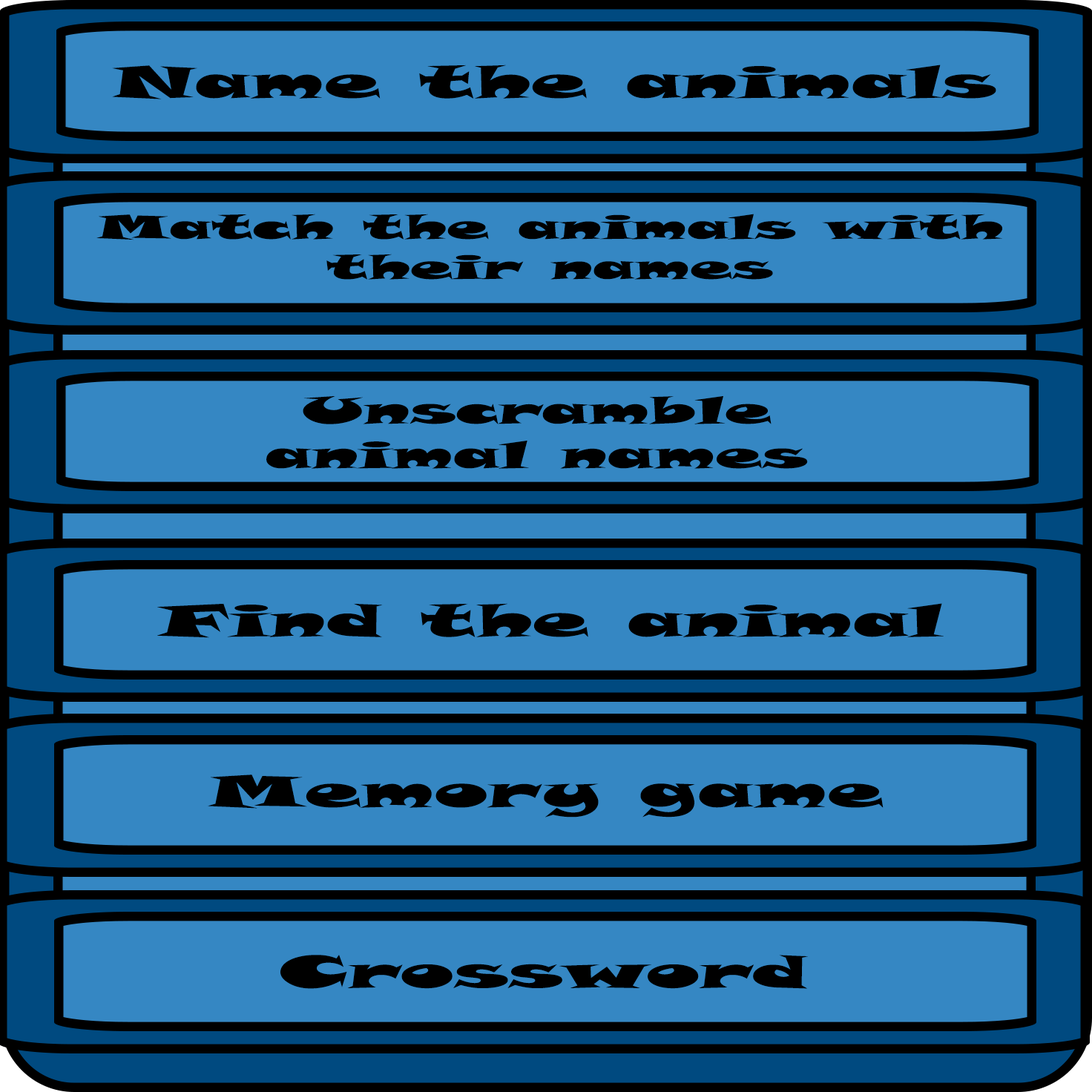
<style>
.page{position:relative;width:1092px;height:1092px;background:#3587c3}
.page>*{position:absolute;margin:0}
.t1{font:44.5px "SnapITC-Regular";color:#000000;scale:2 1}
.t2{font:33.4px "SnapITC-Regular";color:#000000;scale:2 1}
.t3{font:37.1px "SnapITC-Regular";color:#000000;scale:2 1}
.t4{font:59.3px "SnapITC-Regular";color:#000000;scale:2 1}
</style>
<div class="page">
<p class="t1" style="left:112px;top:65px;width:884px;height:34px">Name the animals</p>
<p class="t2" style="left:96px;top:214px;width:907px;height:66px;text-align:center">Match the animals with their names</p>
<p class="t3" style="left:266px;top:396px;width:542px;height:73px;text-align:center"><span class="t1"><br></span>Unscramble<br>animal names</p>
<p class="t1" style="left:157px;top:603px;width:787px;height:35px">Find the animal</p>
<p class="t1" style="left:208px;top:774px;width:676px;height:44px">Memory game</p>
<p class="t1" style="left:280px;top:955px;width:528px;height:34px"><span class="t4"><br></span>Crossword</p>
</div>
